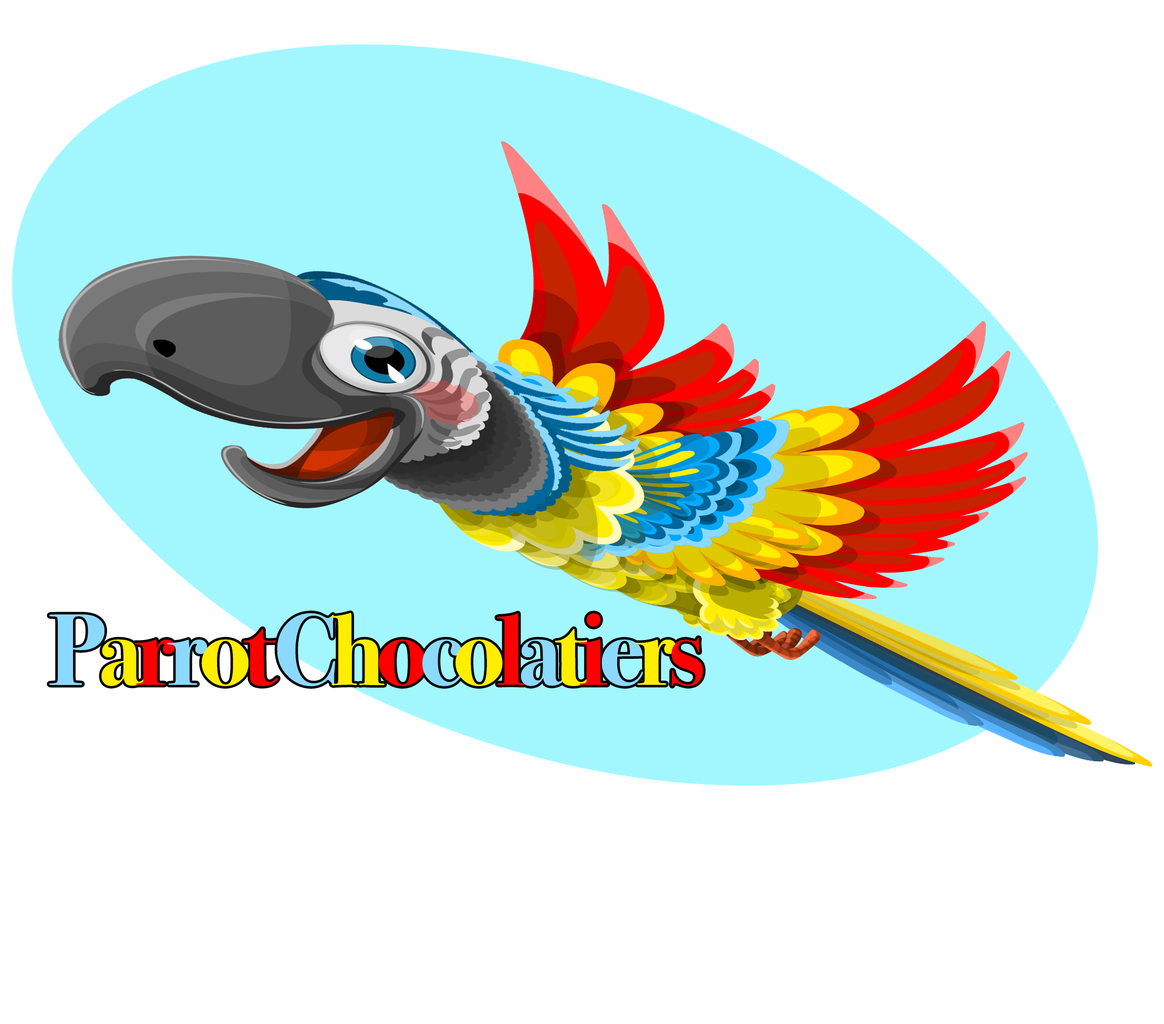
<style>
.page{position:relative;width:1164px;height:1024px;background:#ffffff}
.page>*{position:absolute;margin:0}
.t1{font:101.5px "BodoniSvtyTwoITCTT-Bold";letter-spacing:-0.08em;color:#8cd9ff}
.t2{font:101.5px "BodoniSvtyTwoITCTT-Bold";letter-spacing:-0.08em;color:#ffee00}
.t3{font:101.5px "BodoniSvtyTwoITCTT-Bold";letter-spacing:-0.08em;color:#ff0000}
</style>
<div class="page">
<p class="t1" style="left:49px;top:613px;width:654px;height:73px">P<span class="t2">a</span><span class="t3">r</span>r<span class="t2">o</span><span class="t3">t </span>C<span class="t2">h</span><span class="t3">o</span>c<span class="t2">o</span><span class="t3">l</span>a<span class="t2">t</span><span class="t3">i</span>e<span class="t2">r</span><span class="t3">s</span></p>
</div>
